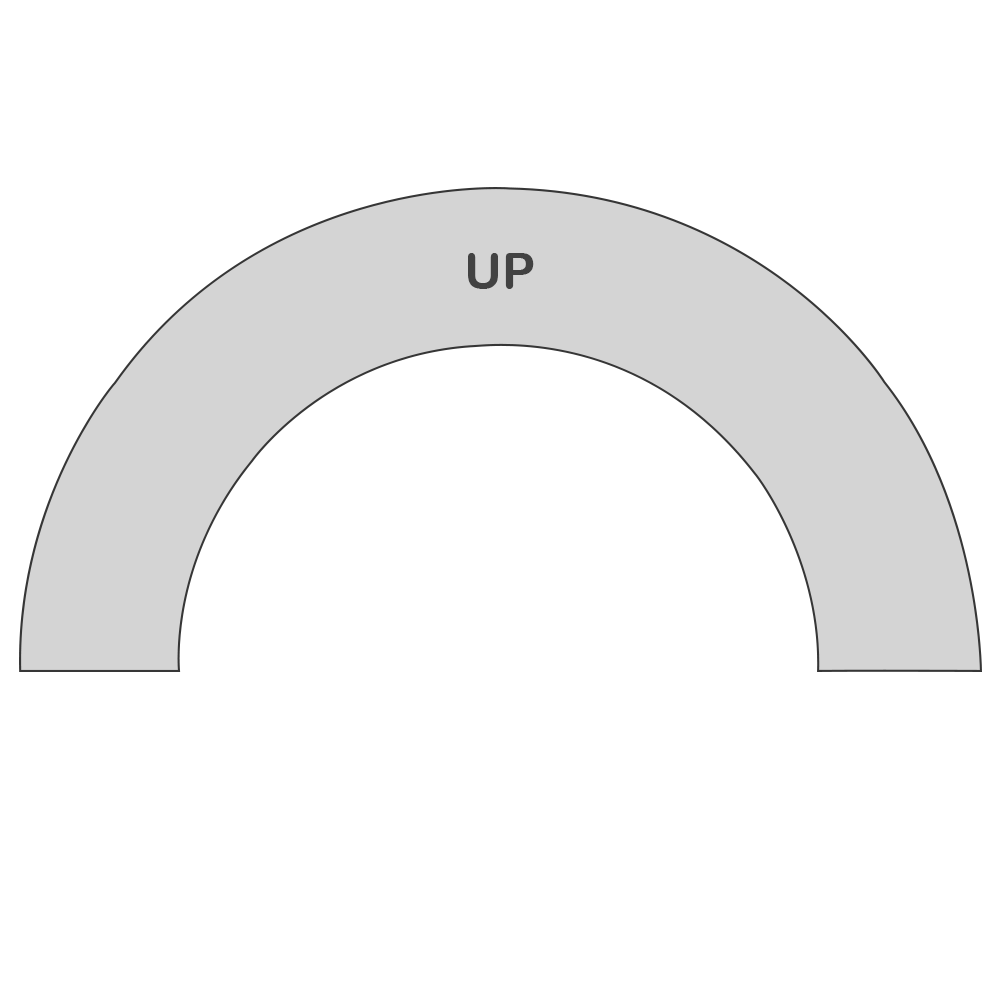
<style>
.page{position:relative;width:1000px;height:1000px;background:#ffffff}
.page>*{position:absolute;margin:0}
.t1{font:50px "ArialRoundedMTBold";color:#424242}
</style>
<div class="page">
<p class="t1" style="left:468px;top:253px;width:66px;height:36px">UP</p>
</div>
